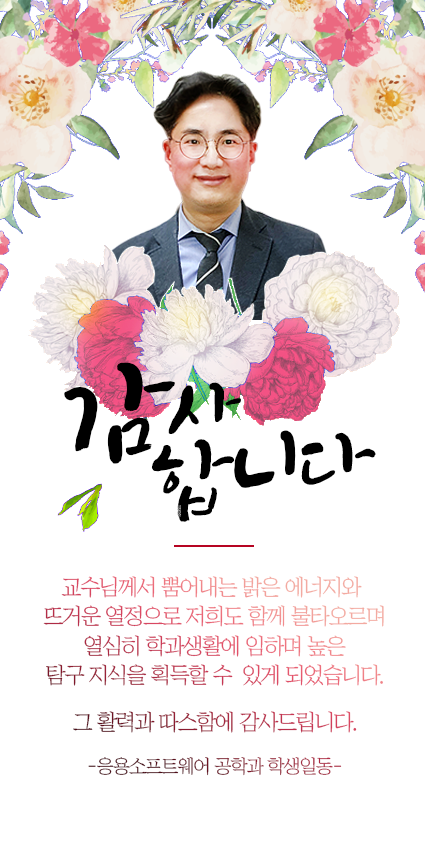
<style>
.page{position:relative;width:425px;height:850px;background:#ffffff}
.page>*{position:absolute;margin:0}
.t1{font:130.2px/79.1px "Makgeolli";letter-spacing:-0.1em;color:#000000}
.t2{font:99.1px/79.1px "Makgeolli";letter-spacing:-0.1em;color:#000000}
.t3{font:99.1px/79.1px "Makgeolli";letter-spacing:-0.08em;color:#000000}
.t4{font:111.2px/79.1px "Makgeolli";letter-spacing:-0.08em;color:#000000}
.t5{font:22.2px/29.6px "ChosunilboNM";letter-spacing:-0.06em}
.t6{font:22.2px/46.1px "ChosunilboNM";letter-spacing:-0.06em}
.t7{font:19px/42.1px "ChosunilboNM";letter-spacing:-0.06em}
</style>
<div class="page">
<p class="t1" style="left:64px;top:362px;width:312px;height:160px;rotate:-6deg">감<span class="t2">사<br>          </span><span class="t3">합</span><span class="t4">니</span><span class="t3">다</span></p>
<p class="t5" style="left:43px;top:576px;width:341px;height:200px;text-align:center">교수님께서 뿜어내는 밝은 에너지와 <br>뜨거운 열정으로 저희도 함께 불타오르며<br>열심히 학과생활에 임하며 높은<br>탐구 지식을 획득할 수  <span class="t6">있게 되었습니다.<br>그 활력과 따스함에 감사드립니다.<br></span><span class="t7">-응용소프트웨어 공학과 학생일동-</span></p>
</div>
